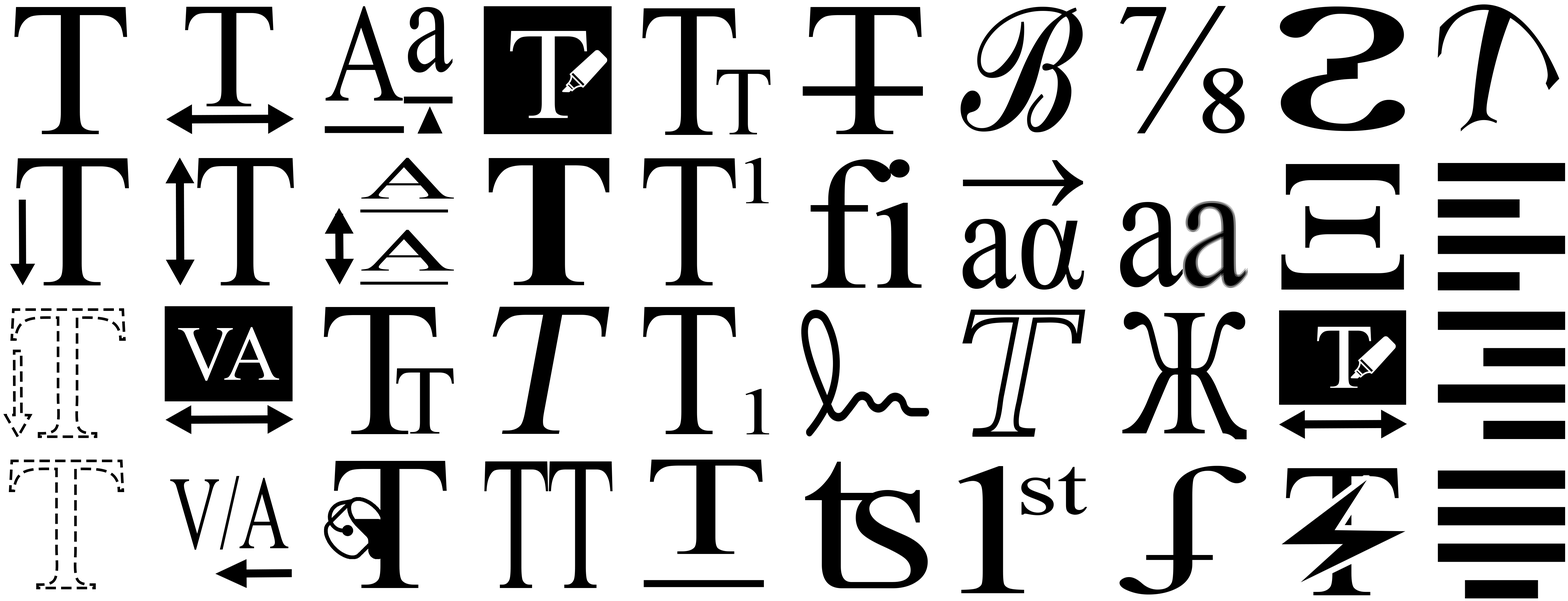
<style>
.page{position:relative;width:1568px;height:601px;background:#ffffff}
.page>*{position:absolute;margin:0}
.t1{font:181.6px "TimesNewRomanPSMT";letter-spacing:-0.02em;color:#000000}
.t2{font:174px "TimesNewRomanPSMT";color:#000000;font-style:italic;scale:0.42 1}
.t3{font:192px "TimesNewRomanPSMT";color:#000000;scale:1.06 1}
.t4{font:150.4px "TimesNewRomanPSMT";color:#000000;scale:1.06 1}
.t5{font:139px "TimesNewRomanPSMT";color:#000000;text-decoration:underline;scale:0.79 1}
.t6{font:191.3px "TimesNewRomanPSMT";color:#000000;scale:0.88 1}
.t7{font:192px "TimesNewRomanPSMT";color:#000000;text-decoration:underline;scale:1.06 1}
.t8{font:188.5px "TimesNewRomanPSMT";color:#000000;scale:0.77 1}
.t9{font:262.4px "TimesNewRomanPSMT";letter-spacing:-0.02em;color:#000000;scale:1.44 1}
.t10{font:97.5px "TimesNewRomanPSMT";color:#000000}
.t11{font:192.2px "TimesNewRomanPSMT";color:#000000;scale:0.91 1}
.t12{font:60.1px "TimesNewRomanPSMT";color:#000000;text-decoration:underline;scale:2.18 1}
.t13{font:192px "TimesNewRomanPS-BoldMT";color:#000000;scale:1.06 1}
.t14{font:192px "TimesNewRomanPSMT";color:#000000;scale:0.87 1}
.t15{font:67.3px "TimesNewRomanPSMT";color:#000000;scale:1.34 1}
.t16{font:184.7px "TimesNewRomanPSMT";color:#000000;scale:1.1 1}
.t17{font:131.8px "TimesNewRomanPSMT";color:#000000}
.t18{font:189.7px "TimesNewRomanPSMT";letter-spacing:-0.02em;color:#000000;scale:1.14 1}
.t19{font:181.6px "TimesNewRomanPSMT";letter-spacing:-0.02em;color:#000000;scale:0.85 1}
.t20{font:192px "TimesNewRomanPSMT";color:#000000;font-style:italic;scale:1.06 1}
.t21{font:181.3px "TimesNewRomanPSMT";letter-spacing:-0.02em;color:#000000;scale:0.78 1}
.t22{font:98.2px "TimesNewRomanPSMT";color:#000000;scale:1.06 1}
.t23{font:191.3px "TimesNewRomanPSMT";color:#000000;scale:0.6 1}
.t24{font:142.6px "TimesNewRomanPSMT";color:#000000;text-decoration:underline;scale:1.42 1}
.t25{font:212.7px "TimesNewRomanPSMT";color:#000000;scale:1.11 1}
.t26{font:187.9px "TimesNewRomanPSMT";letter-spacing:-0.02em;color:#000000;scale:1.34 1}
.t27{font:135.8px "TimesNewRomanPSMT";color:#000000;scale:1.34 1}
.t28{font:141.3px "TimesNewRomanPSMT";letter-spacing:-0.02em;color:#000000;scale:1.67 1}
.t29{font:104px "TimesNewRomanPSMT";color:#000000;scale:0.67 1}
</style>
<div class="page">
<p class="t1" style="left:1120px;top:6px;width:125px;height:127px">⅞</p>
<p class="t2" style="left:1438px;top:4px;width:121px;height:127px">T</p>
<p class="t3" style="left:14px;top:7px;width:113px;height:127px">T</p>
<p class="t4" style="left:185px;top:7px;width:88px;height:99px">T</p>
<p class="t5" style="left:325px;top:6px;width:128px;height:127px">Aa</p>
<p class="t6" style="left:642px;top:8px;width:94px;height:127px">T</p>
<p class="t7" style="left:803px;top:7px;width:120px;height:172px">T</p>
<p class="t8" style="left:961px;top:7px;width:122px;height:125px">ℬ</p>
<p class="t9" style="left:1280px;top:6px;width:125px;height:125px">ᴤ</p>
<p class="t10" style="left:716px;top:70px;width:55px;height:64px">T</p>
<p class="t3" style="left:16px;top:158px;width:113px;height:127px">T</p>
<p class="t11" style="left:197px;top:158px;width:97px;height:127px">T</p>
<p class="t12" style="left:360px;top:158px;width:94px;height:127px">A<br>A</p>
<p class="t13" style="left:489px;top:158px;width:121px;height:127px">T</p>
<p class="t14" style="left:643px;top:158px;width:93px;height:127px">T</p>
<p class="t15" style="left:745px;top:158px;width:24px;height:45px">1</p>
<p class="t16" style="left:811px;top:159px;width:111px;height:129px">fi</p>
<p class="t17" style="left:963px;top:160px;width:120px;height:46px">→</p>
<p class="t18" style="left:1281px;top:164px;width:123px;height:125px">Ξ</p>
<p class="t19" style="left:1120px;top:202px;width:63px;height:85px">a</p>
<p class="t3" style="left:324px;top:307px;width:113px;height:127px">T</p>
<p class="t20" style="left:493px;top:307px;width:117px;height:127px">T</p>
<p class="t14" style="left:643px;top:307px;width:93px;height:127px">T</p>
<p class="t21" style="left:1122px;top:312px;width:125px;height:156px">Җ</p>
<p class="t22" style="left:396px;top:368px;width:58px;height:65px">T</p>
<p class="t15" style="left:745px;top:389px;width:24px;height:45px">1</p>
<p class="t3" style="left:334px;top:461px;width:113px;height:127px">T</p>
<p class="t23" style="left:484px;top:461px;width:64px;height:127px">T</p>
<p class="t23" style="left:549px;top:461px;width:64px;height:127px">T</p>
<p class="t24" style="left:644px;top:459px;width:120px;height:128px">T</p>
<p class="t25" style="left:805px;top:461px;width:123px;height:127px">ʦ</p>
<p class="t26" style="left:958px;top:466px;width:66px;height:127px">1</p>
<p class="t27" style="left:1021px;top:467px;width:66px;height:48px">st</p>
<p class="t28" style="left:1120px;top:466px;width:126px;height:128px">ʄ</p>
<p class="t3" style="left:1286px;top:468px;width:113px;height:127px">T</p>
<p class="t29" style="left:170px;top:476px;width:118px;height:74px">V/A</p>
</div>
